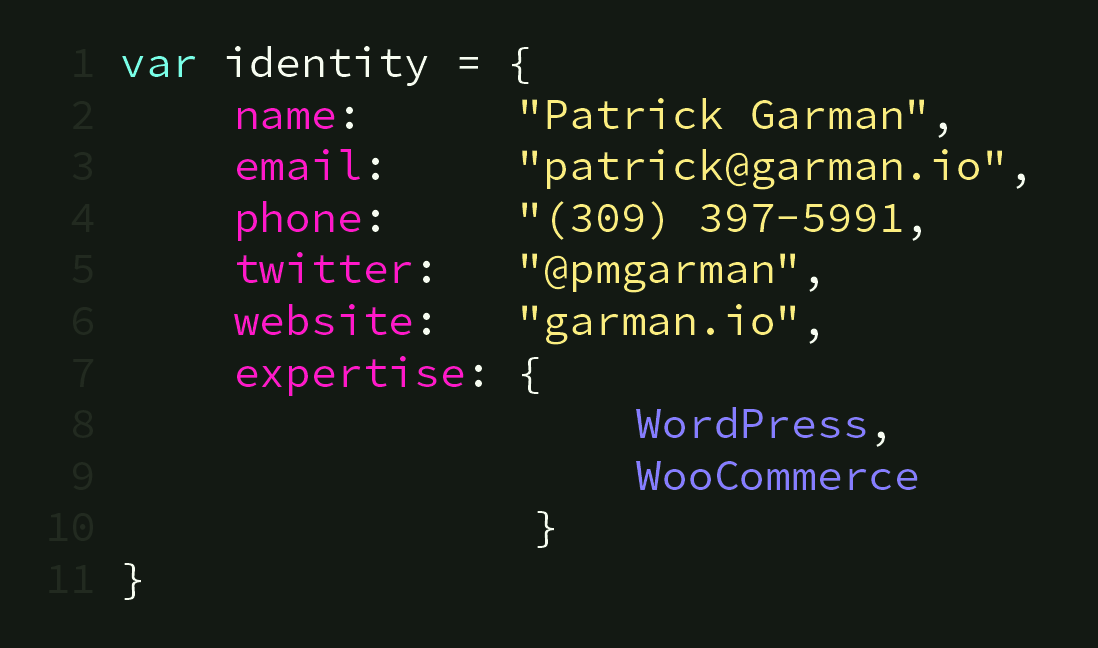
<style>
.page{position:relative;width:1098px;height:648px;background:#131913}
.page>*{position:absolute;margin:0}
.t1{font:43px "SourceCodePro-Regular";color:#222a20}
.t2{font:43px "SourceCodePro-Regular";color:#fbed7f}
.t3{font:43px "SourceCodePro-Regular";color:#79ffe8}
.t4{font:43px "SourceCodePro-Regular";color:#f7fcf1}
.t5{font:43px "SourceCodePro-Regular";color:#ff18c9}
.t6{font:43px "SourceCodePro-Regular";color:#867dff}
</style>
<div class="page">
<p class="t1" style="left:49px;top:49px;width:45px;height:544px;text-align:right">1<br>2<br>3<br>4<br>5<br>6<br>7<br>8<br>9<br>10<br>11</p>
<p class="t2" style="left:122px;top:46px;width:903px;height:554px"><span class="t3">var </span><span class="t4">identity = {<br>    </span><span class="t5">name</span><span class="t4">:      </span>"Patrick Garman"<span class="t4">,<br>    </span><span class="t5">email</span><span class="t4">:     </span>"patrick@garman.io"<span class="t4">,<br>    </span><span class="t5">phone</span><span class="t4">:     </span>"(309) 397-5991<span class="t4">,<br>    </span><span class="t5">twitter</span><span class="t4">:   </span>"@pmgarman"<span class="t4">,<br>    </span><span class="t5">website</span><span class="t4">:   </span>"garman.io"<span class="t4">,<br>    </span><span class="t5">expertise</span><span class="t4">: {<br>                    </span><span class="t6">WordPress</span><span class="t4">,<br>                    </span><span class="t6">WooCommerce</span><span class="t4"><br>                }<br>}</span></p>
</div>
